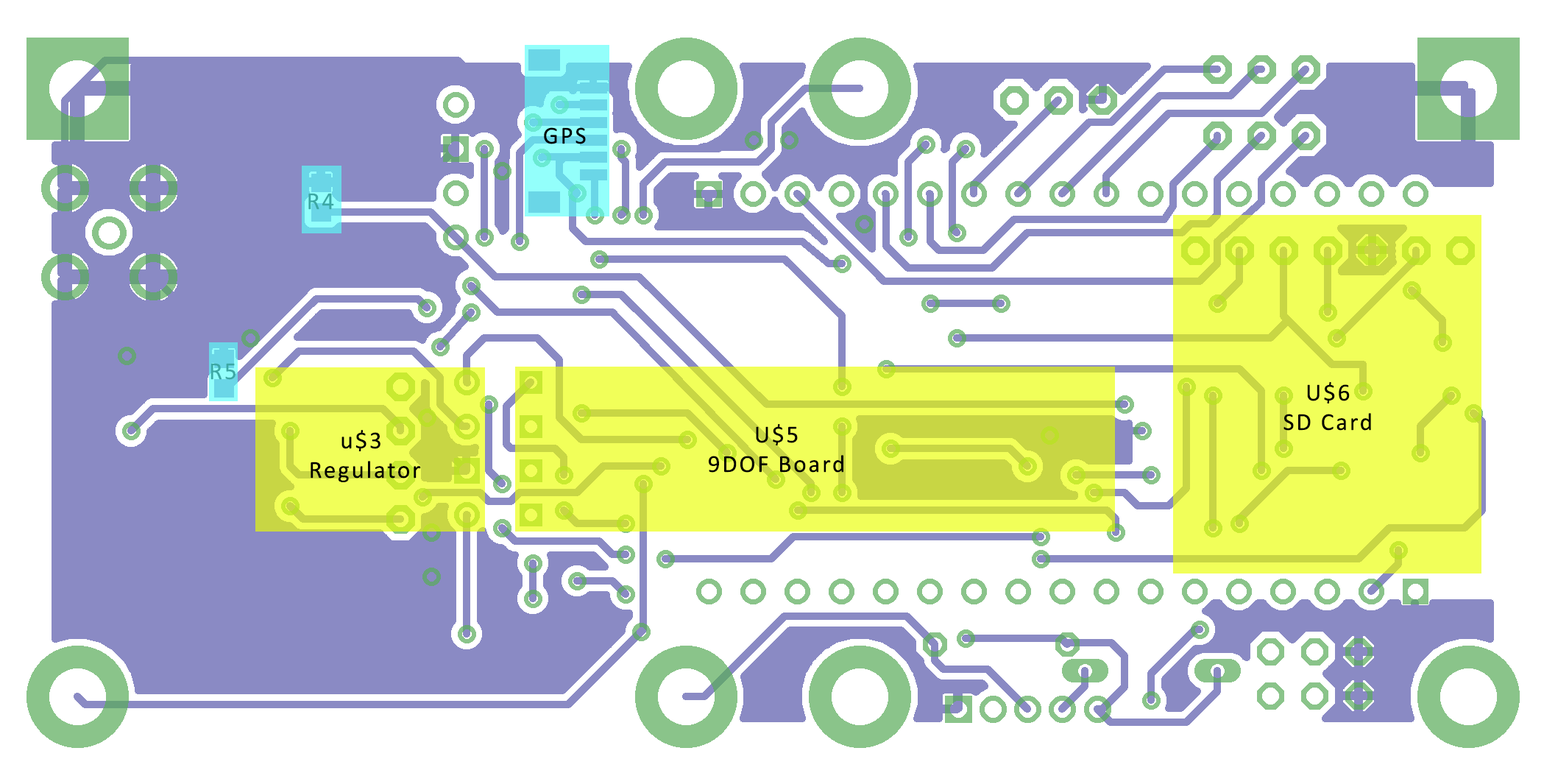
<style>
.page{position:relative;width:1544px;height:773px;background:#ffffff}
.page>*{position:absolute;margin:0}
.t1{font:24.5px "Calibri";letter-spacing:0.08em;color:#000000}
.t2{font:24.5px "Calibri";letter-spacing:0.08em;color:#3ca8a4}
</style>
<div class="page">
<p class="t1" style="left:544px;top:127px;width:42px;height:17px">GPS</p>
<p class="t2" style="left:308px;top:193px;width:26px;height:17px">R4</p>
<p class="t2" style="left:210px;top:363px;width:25px;height:17px">R5</p>
<p class="t1" style="left:1283px;top:382px;width:88px;height:48px;text-align:center">U$6<br>SD Card</p>
<p class="t1" style="left:709px;top:424px;width:134px;height:48px;text-align:center">U$5<br>9DOF Board</p>
<p class="t1" style="left:310px;top:430px;width:111px;height:52px;text-align:center">u$3 <br>Regulator</p>
</div>
